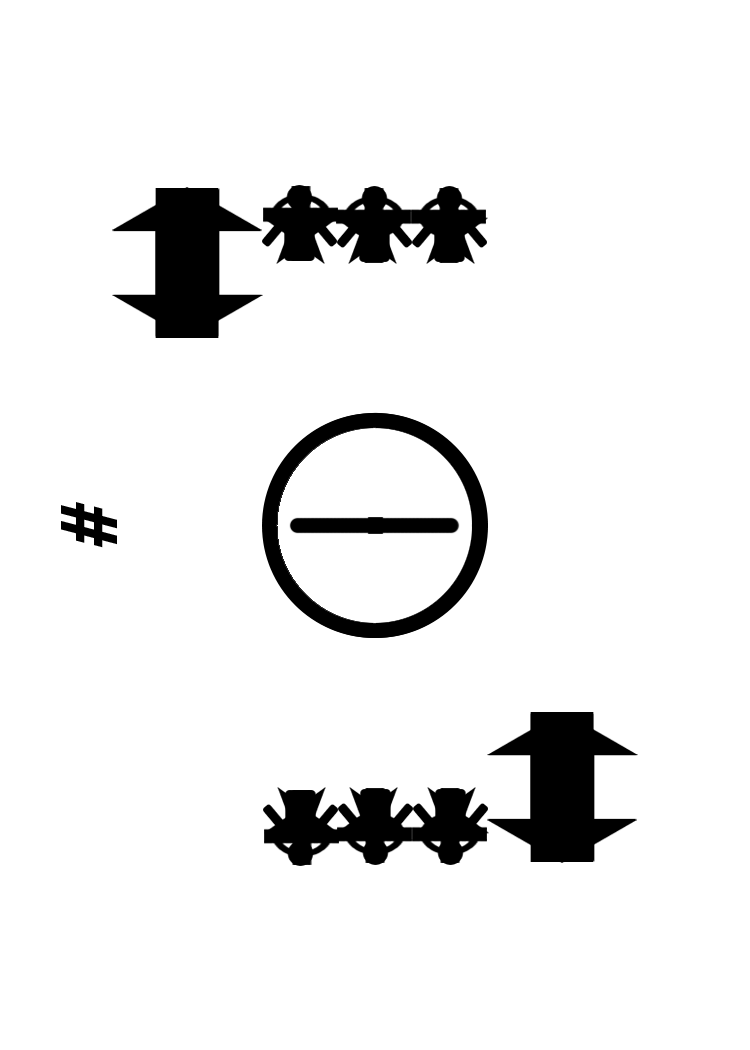
<style>
.page{position:relative;width:750px;height:1050px;background:#ffffff}
.page>*{position:absolute;margin:0}
.t1{font:68.1px "LeagueSpartan-Bold";letter-spacing:0.04em;color:#000000}
</style>
<div class="page">
<p class="t1" style="left:61px;top:502px;width:56px;height:46px;rotate:90deg">#</p>
</div>
